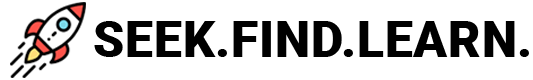
<style>
.page{position:relative;width:533px;height:80px;background:#ffffff}
.page>*{position:absolute;margin:0}
.t1{font:50px "Roboto-Black";letter-spacing:0.015em;color:#000000}
</style>
<div class="page">
<p class="t1" style="left:94px;top:21px;width:435px;height:36px">SEEK.FIND.LEARN.</p>
</div>
